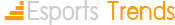
<style>
.page{position:relative;width:175px;height:25px;background:#ffffff}
.page>*{position:absolute;margin:0}
.t1{font:31.3px "supermarket";color:#cccccc;scale:0.91 1}
.t2{font:31.3px "supermarket";color:#ff9c00;scale:0.91 1}
</style>
<div class="page">
<p class="t1" style="left:27px;top:0px;width:148px;height:25px">Esports<span class="t2"> Trends</span></p>
</div>
